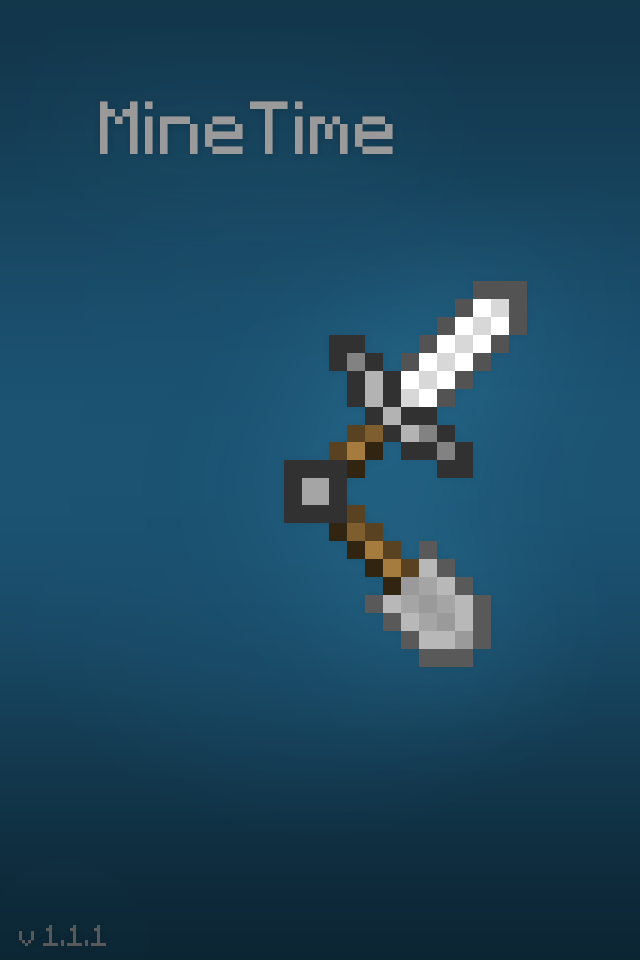
<style>
.page{position:relative;width:640px;height:960px}
.page>*{position:absolute;margin:0}
.t1{font:60px "Minecraft";color:#9a9a9a}
.t2{font:24px "Minecraft";color:#595959}
</style>
<div class="page">
<p class="t1" style="left:100px;top:101px;width:293px;height:53px">MineTime</p>
<p class="t2" style="left:19px;top:925px;width:87px;height:21px">v 1.1.1</p>
</div>
